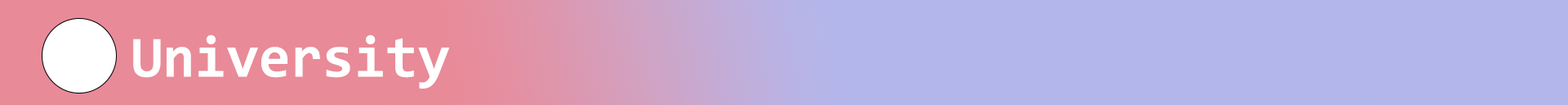
<style>
.page{position:relative;width:1568px;height:105px;background:#b3b6eb}
.page>*{position:absolute;margin:0}
.t1{font:58px "Consolas-Bold";color:#ffffff}
</style>
<div class="page">
<p class="t1" style="left:133px;top:34px;width:317px;height:54px">University</p>
</div>
